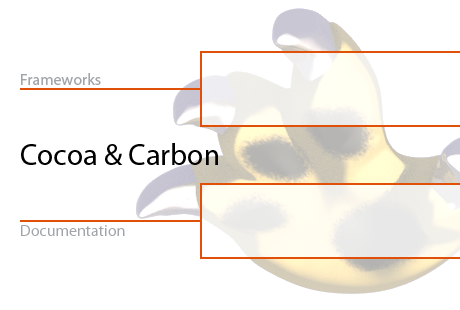
<style>
.page{position:relative;width:460px;height:310px;background:#ffffff}
.page>*{position:absolute;margin:0}
.t1{font:16px "Myriad-Roman";color:#a1a5a9}
.t2{font:30px "Myriad-Roman";color:#000000}
</style>
<div class="page">
<p class="t1" style="left:21px;top:73px;width:80px;height:12px">Frameworks</p>
<p class="t2" style="left:21px;top:143px;width:197px;height:22px">Cocoa &amp; Carbon</p>
<p class="t1" style="left:21px;top:225px;width:104px;height:11px">Documentation</p>
</div>
